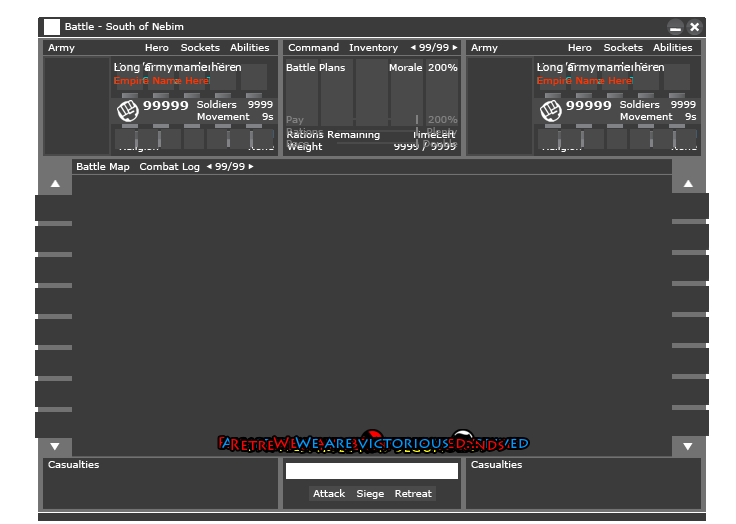
<style>
.page{position:relative;width:736px;height:524px;background:#3b3b3b}
.page>*{position:absolute;margin:0}
.t1{font:10px "Verdana";color:#ffffff}
.t2{font:10px "Verdana";color:#fefefe}
.t3{font:11px "Verdana"}
.t4{font:11px "Verdana";color:#ffffff}
.t5{font:10px "Verdana";color:#ff3300}
.t6{font:13px "Verdana-Bold";color:#ffffff}
.t7{font:10px "Verdana";color:#808080}
.t8{font:10px "Verdana";color:#4a4a4a}
.t9{font:10px "Verdana"}
.t10{font:15px "LithosPro-Regular";letter-spacing:0.02em}
.t11{font:15px "LithosPro-Regular";letter-spacing:0.02em;color:#0099ff}
</style>
<div class="page">
<p class="t1" style="left:65px;top:22px;width:119px;height:8px">Battle - South of Nebim</p>
<p class="t2" style="left:48px;top:44px;width:27px;height:9px">Army</p>
<p class="t1" style="left:145px;top:44px;width:24px;height:7px">Hero</p>
<p class="t1" style="left:181px;top:43px;width:39px;height:8px">Sockets</p>
<p class="t1" style="left:230px;top:43px;width:40px;height:8px">Abilities</p>
<p class="t1" style="left:288px;top:43px;width:51px;height:8px">Command</p>
<p class="t1" style="left:349px;top:44px;width:49px;height:9px">Inventory</p>
<p class="t1" style="left:419px;top:43px;width:30px;height:9px">99/99</p>
<p class="t2" style="left:471px;top:44px;width:27px;height:9px">Army</p>
<p class="t1" style="left:568px;top:44px;width:24px;height:7px">Hero</p>
<p class="t1" style="left:604px;top:43px;width:39px;height:8px">Sockets</p>
<p class="t1" style="left:653px;top:43px;width:40px;height:8px">Abilities</p>
<p class="t3" style="left:114px;top:62px;width:134px;height:10px">Hero/Commander Name</p>
<p class="t4" style="left:114px;top:62px;width:122px;height:11px">Long army name here</p>
<p class="t1" style="left:286px;top:63px;width:59px;height:8px">Battle Plans</p>
<p class="t1" style="left:389px;top:63px;width:34px;height:8px">Morale</p>
<p class="t1" style="left:428px;top:64px;width:30px;height:7px">200%</p>
<p class="t3" style="left:537px;top:62px;width:134px;height:10px">Hero/Commander Name</p>
<p class="t4" style="left:537px;top:62px;width:122px;height:11px">Long army name here</p>
<p class="t5" style="left:114px;top:77px;width:95px;height:9px">Empire Name Here</p>
<p class="t5" style="left:537px;top:77px;width:95px;height:9px">Empire Name Here</p>
<p class="t6" style="left:143px;top:101px;width:46px;height:9px">99999</p>
<p class="t1" style="left:197px;top:100px;width:40px;height:8px">Soldiers</p>
<p class="t1" style="left:248px;top:101px;width:25px;height:7px">9999</p>
<p class="t6" style="left:566px;top:101px;width:46px;height:9px">99999</p>
<p class="t1" style="left:620px;top:100px;width:40px;height:8px">Soldiers</p>
<p class="t1" style="left:671px;top:101px;width:25px;height:7px">9999</p>
<p class="t1" style="left:197px;top:113px;width:53px;height:7px">Movement</p>
<p class="t1" style="left:262px;top:113px;width:12px;height:7px">9s</p>
<p class="t1" style="left:620px;top:113px;width:53px;height:7px">Movement</p>
<p class="t1" style="left:685px;top:113px;width:12px;height:7px">9s</p>
<p class="t7" style="left:286px;top:116px;width:18px;height:9px">Pay</p>
<p class="t7" style="left:428px;top:116px;width:30px;height:7px">200%</p>
<p class="t7" style="left:286px;top:128px;width:37px;height:7px">Rations</p>
<p class="t2" style="left:287px;top:131px;width:93px;height:9px">Rations Remaining</p>
<p class="t2" style="left:411px;top:130px;width:45px;height:8px">TimeLeft</p>
<p class="t8" style="left:119px;top:142px;width:40px;height:10px">Religion</p>
<p class="t8" style="left:248px;top:143px;width:26px;height:7px">None</p>
<p class="t2" style="left:287px;top:142px;width:36px;height:10px">Weight</p>
<p class="t9" style="left:394px;top:142px;width:62px;height:9px">9999 / 9999</p>
<p class="t7" style="left:423px;top:139px;width:35px;height:8px">Double</p>
<p class="t8" style="left:542px;top:142px;width:40px;height:10px">Religion</p>
<p class="t8" style="left:671px;top:143px;width:26px;height:7px">None</p>
<p class="t1" style="left:77px;top:162px;width:53px;height:10px">Battle Map</p>
<p class="t1" style="left:140px;top:162px;width:60px;height:10px">Combat Log</p>
<p class="t1" style="left:215px;top:162px;width:30px;height:9px">99/99</p>
<p class="t10" style="left:273px;top:437px;width:205px;height:12px">We have been defeated...</p>
<p class="t11" style="left:295px;top:437px;width:153px;height:12px">We are victorious</p>
<p class="t10" style="left:231px;top:439px;width:273px;height:11px">Retreat complete in        seconds</p>
<p class="t1" style="left:48px;top:460px;width:51px;height:8px">Casualties</p>
<p class="t1" style="left:471px;top:460px;width:51px;height:8px">Casualties</p>
<p class="t1" style="left:313px;top:489px;width:33px;height:8px">Attack</p>
<p class="t1" style="left:357px;top:490px;width:27px;height:9px">Siege</p>
<p class="t1" style="left:395px;top:490px;width:37px;height:7px">Retreat</p>
</div>
